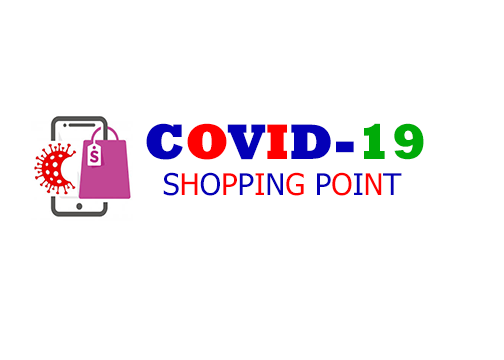
<style>
.page{position:relative;width:504px;height:360px;background:#ffffff}
.page>*{position:absolute;margin:0}
.t1{font:51px "Rockwell-ExtraBold";color:#0400b7}
.t2{font:51px "Rockwell-ExtraBold";color:#ff0000}
.t3{font:51px "Rockwell-ExtraBold";color:#00ab08}
.t4{font:30px "Tahoma";color:#0400b7}
.t5{font:30px "Tahoma";color:#ff0000}
</style>
<div class="page">
<p class="t1" style="left:146px;top:123px;width:278px;height:73px">C<span class="t2">O</span>V<span class="t2">I</span>D-<span class="t3">19 <br></span><span class="t4">  S</span><span class="t5">H</span><span class="t4">O</span><span class="t5">P</span><span class="t4">P</span><span class="t5">I</span><span class="t4">N</span><span class="t5">G</span><span class="t4"> P</span><span class="t5">O</span><span class="t4">I</span><span class="t5">N</span><span class="t4">T</span></p>
</div>
